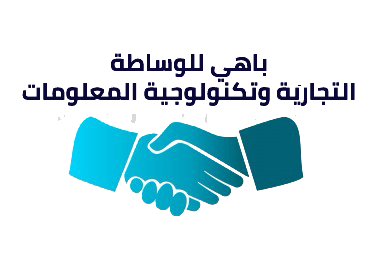
<style>
.page{position:relative;width:370px;height:254px;background:#ffffff}
.page>*{position:absolute;margin:0}
.t1{font:24px "Cairo-Bold";color:#0a0839}
</style>
<div class="page">
<p class="t1" style="left:22px;top:53px;width:333px;height:53px;text-align:center">باهي للوساطة<br>التجارية وتكنولوجية المعلومات</p>
</div>
